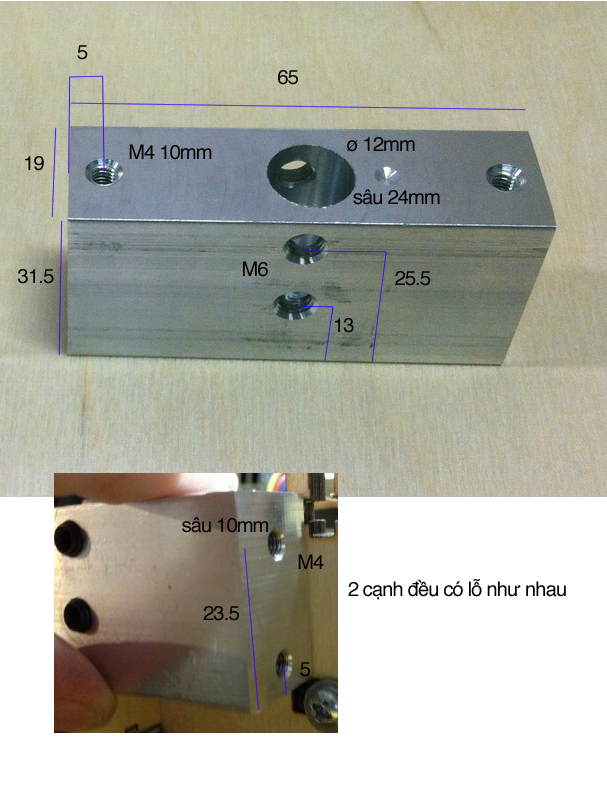
<style>
.page{position:relative;width:607px;height:800px;background:#ffffff}
.page>*{position:absolute;margin:0}
.t1{font:20px "Helvetica";letter-spacing:-0.04em;color:#000000}
</style>
<div class="page">
<p class="t1" style="left:77px;top:45px;width:11px;height:15px">5</p>
<p class="t1" style="left:278px;top:70px;width:20px;height:15px">65</p>
<p class="t1" style="left:347px;top:137px;width:68px;height:15px">ø 12mm</p>
<p class="t1" style="left:129px;top:144px;width:83px;height:16px">M4 10mm</p>
<p class="t1" style="left:25px;top:156px;width:19px;height:15px">19</p>
<p class="t1" style="left:353px;top:189px;width:87px;height:16px">sâu 24mm</p>
<p class="t1" style="left:18px;top:269px;width:36px;height:15px">31.5</p>
<p class="t1" style="left:243px;top:261px;width:25px;height:16px">M6</p>
<p class="t1" style="left:395px;top:271px;width:36px;height:15px">25.5</p>
<p class="t1" style="left:335px;top:318px;width:19px;height:15px">13</p>
<p class="t1" style="left:182px;top:517px;width:86px;height:16px">sâu 10mm</p>
<p class="t1" style="left:298px;top:554px;width:26px;height:15px">M4</p>
<p class="t1" style="left:348px;top:579px;width:218px;height:21px">2 cạnh đều có lỗ như nhau</p>
<p class="t1" style="left:203px;top:606px;width:36px;height:15px">23.5</p>
<p class="t1" style="left:300px;top:662px;width:10px;height:15px">5</p>
</div>
